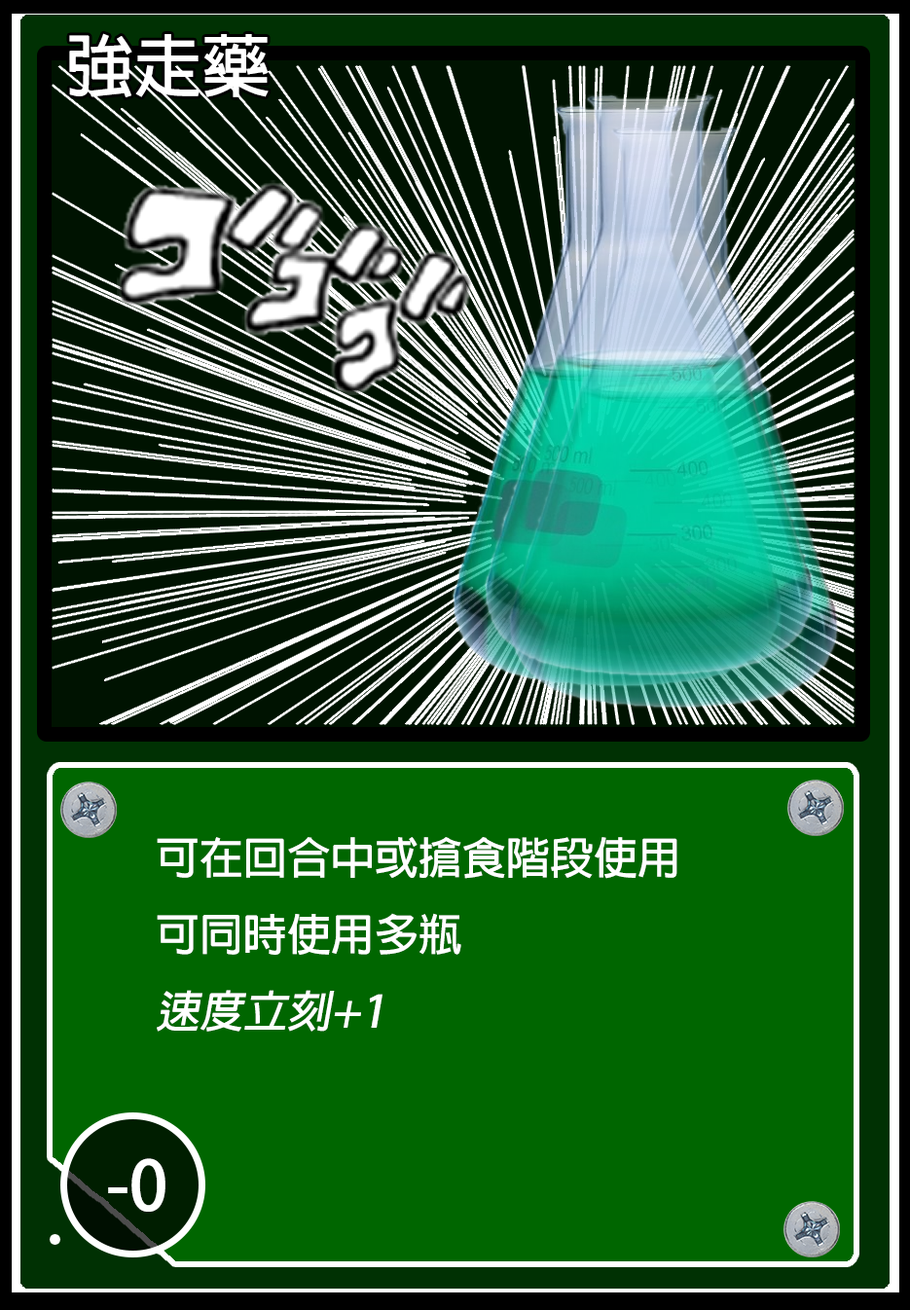
<style>
.page{position:relative;width:910px;height:1310px;background:#006600}
.page>*{position:absolute;margin:0}
.t1{font:68.1px "AdobeFanHeitiStd-Bold";color:#ffffff}
.t2{font:43.8px "AdobeFanHeitiStd-Bold";color:#ffffff}
.t3{font:43.8px "AdobeFanHeitiStd-Bold";color:#ffffff;font-style:italic}
</style>
<div class="page">
<p class="t1" style="left:69px;top:33px;width:200px;height:64px">強走藥</p>
<p class="t2" style="left:157px;top:837px;width:520px;height:195px">可在回合中或搶食階段使用<br>可同時使用多瓶<br><span class="t3">速度立刻+1</span></p>
<p class="t1" style="left:108px;top:1158px;width:57px;height:54px">-0</p>
</div>
